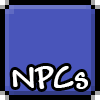
<style>
.page{position:relative;width:100px;height:100px;background:#4955ba}
.page>*{position:absolute;margin:0}
.t1{font:36px "Andy-Bold";color:#ffffff}
</style>
<div class="page">
<p class="t1" style="left:12px;top:66px;width:76px;height:23px">NPCs</p>
</div>
